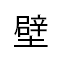
<style>
.page{position:relative;width:64px;height:64px;background:#ffffff}
.page>*{position:absolute;margin:0}
.t1{font:36px "KozGoPr6N-Regular";color:#000000}
</style>
<div class="page">
<p class="t1" style="left:14px;top:14px;width:34px;height:33px">壁</p>
</div>
